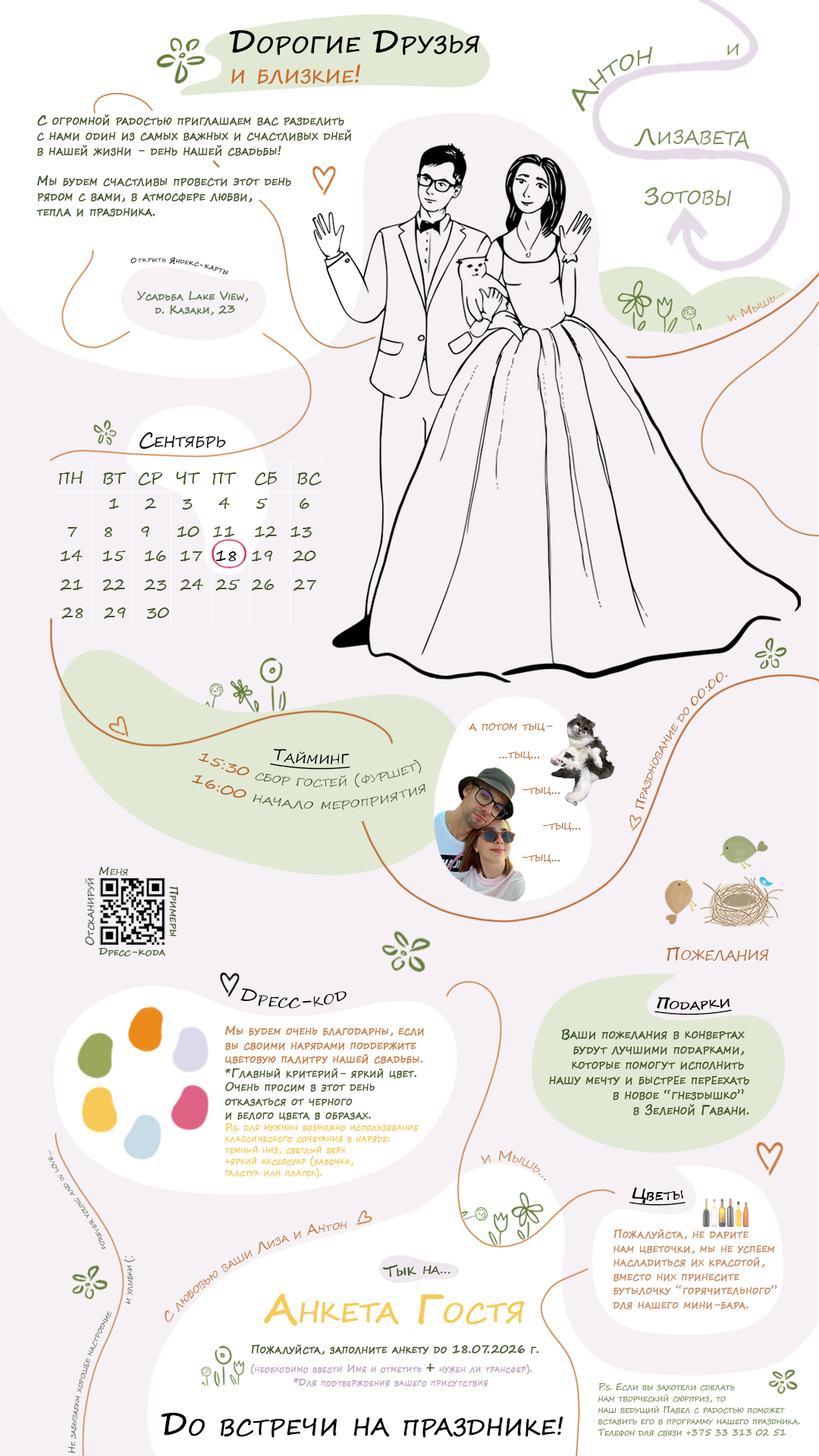
<style>
.page{position:relative;width:819px;height:1456px;background:#f5f1f5}
.page>*{position:absolute;margin:0}
.t1{font:31.6px "SegoeScript";color:#000000;font-variant:small-caps;font-weight:bold;scale:0.97 1}
.t2{font:25.3px "SegoeScript";color:#c77130;font-variant:small-caps;font-weight:bold;scale:0.97 1}
.t3{font:25.3px "SegoeScript";color:#768d52;font-variant:small-caps;scale:0.97 1}
.t4{font:19.6px "SegoeScript";color:#768d52;font-variant:small-caps}
.t5{font:12.6px "SegoeScript";color:#435528;font-variant:small-caps;font-weight:bold;scale:0.97 1}
.t6{font:7.9px "SegoeScript-Bold";color:#030303;font-variant:small-caps}
.t7{font:11.1px "SegoeScript";color:#64724e;font-variant:small-caps;font-weight:bold}
.t8{font:12.6px "SegoeScript";color:#d28f62;font-variant:small-caps;scale:0.97 1}
.t9{font:12.6px "SegoeScript";color:#b9672c;font-variant:small-caps}
.t10{font:14.1px/11.3px "SegoeScript";color:#4e5f34;font-variant:small-caps}
.t11{font:16.9px/11.3px "SegoeScript";color:#000000;font-variant:small-caps;text-decoration:underline}
.t12{font:14.1px/11.3px "SegoeScript";color:#b9672c;font-variant:small-caps}
.t13{font:11.7px "SegoeScript";color:#435528;font-variant:small-caps}
.t14{font:11.7px "SegoeScript-Bold";color:#435528;font-variant:small-caps}
.t15{font:10.7px "SegoeScript-Bold";color:#435528;font-variant:small-caps}
.t16{font:19px "SegoeScript";color:#b9672c;font-variant:small-caps}
.t17{font:19px "SegoeScript";color:#000000;font-variant:small-caps}
.t18{font:15.8px "SegoeScript-Bold";color:#000000;font-variant:small-caps;text-decoration:underline}
.t19{font:9.5px "SegoeScript";color:#f7ca57;font-variant:small-caps;font-weight:bold;scale:0.97 1}
.t20{font:11.7px "SegoeScript";color:#c97c40;font-variant:small-caps;font-weight:bold;scale:0.97 1}
.t21{font:11.7px "SegoeScript";color:#4a5c32;font-variant:small-caps;font-weight:bold;scale:0.97 1}
.t22{font:8.4px "SegoeScript";color:#51603b;font-variant:small-caps}
.t23{font:12.6px "SegoeScript";color:#c77130;font-variant:small-caps}
.t24{font:11.7px "SegoeScript";color:#c98c61;font-variant:small-caps;font-weight:bold;scale:0.97 1}
.t25{font:8.4px "SegoeScript";color:#4c5c34;font-variant:small-caps}
.t26{font:14.6px "SegoeScript-Bold";color:#4a5c31;font-variant:small-caps}
.t27{font:37.9px "SegoeScript";color:#f7ca57;font-variant:small-caps;font-weight:bold}
.t28{font:8.4px "SegoeScript";color:#435528;font-variant:small-caps}
.t29{font:11.7px "SegoeScript";color:#435528;font-variant:small-caps;font-weight:bold;scale:0.97 1}
.t30{font:9.5px "SegoeScript";color:#bfa6bf;font-variant:small-caps;font-weight:bold;scale:0.97 1}
.t31{font:15.8px "SegoeScript";color:#435528;font-variant:small-caps;font-weight:bold;scale:0.97 1}
.t32{font:9.5px "SegoeScript";color:#6d8546;font-variant:small-caps;scale:0.97 1}
.t33{font:25.3px "SegoeScript";color:#000000;font-variant:small-caps;font-weight:bold;scale:0.97 1}
</style>
<div class="page">
<p class="t1" style="left:229px;top:30px;width:251px;height:54px">Дорогие Друзья <br><span class="t2">и близкие!</span></p>
<p class="t3" style="left:572px;top:46px;width:81px;height:65px;rotate:-35deg">Антон</p>
<p class="t4" style="left:727px;top:43px;width:12px;height:12px;rotate:-2deg">и</p>
<p class="t5" style="left:36px;top:115px;width:315px;height:102px">С огромной радостью приглашаем вас разделить<br>с нами один из самых важных и счастливых дней<br>в нашей жизни - день нашей свадьбы!<br><br>Мы будем счастливы провести этот день <br>рядом с вами, в атмосфере любви, <br>тепла и праздника.</p>
<p class="t3" style="left:634px;top:128px;width:115px;height:21px">Лизавета</p>
<p class="t3" style="left:644px;top:187px;width:87px;height:19px">Зотовы</p>
<p class="t6" style="left:130px;top:257px;width:99px;height:18px;rotate:7deg">Открыть Яндекс-карты</p>
<p class="t7" style="left:136px;top:291px;width:112px;height:24px;text-align:center">Усадьба Lake View, <br>д. Казаки, 23</p>
<p class="t8" style="left:726px;top:293px;width:57px;height:29px;rotate:-27deg">и Мышь...</p>
<p class="t9" style="left:635px;top:672px;width:92px;height:137px;rotate:-62deg">Празднование до 00:00.</p>
<p class="t9" style="left:469px;top:723px;width:84px;height:9px">а потом тыц-</p>
<p class="t10" style="left:191px;top:748px;width:235px;height:62px;text-align:center;rotate:2deg"><span class="t11">Тайминг<br><br></span><span class="t12">15:30</span> сбор гостей (фуршет)<br><br><span class="t12">16:00</span> начало мероприятия</p>
<p class="t9" style="left:499px;top:751px;width:41px;height:9px">...тыц...</p>
<p class="t9" style="left:522px;top:787px;width:38px;height:8px">-тыц...</p>
<p class="t9" style="left:543px;top:823px;width:38px;height:8px">-тыц...</p>
<p class="t9" style="left:522px;top:855px;width:38px;height:8px">-тыц...</p>
<p class="t13" style="left:99px;top:867px;width:29px;height:9px">Меня</p>
<p class="t13" style="left:85px;top:878px;width:10px;height:68px;rotate:-90deg">Отсканируй</p>
<p class="t14" style="left:169px;top:886px;width:10px;height:51px;rotate:90deg">Примеры</p>
<p class="t15" style="left:99px;top:948px;width:67px;height:8px">Дресс-кода</p>
<p class="t16" style="left:667px;top:947px;width:102px;height:15px">Пожелания</p>
<p class="t17" style="left:240px;top:988px;width:107px;height:21px">Дресс-код</p>
<p class="t18" style="left:654px;top:996px;width:78px;height:19px;rotate:-1deg">Подарки</p>
<p class="t19" style="left:224px;top:1025px;width:200px;height:153px"><span class="t20">Мы будем очень благодарны, если <br>вы своими нарядами поддержите <br>цветовую палитру нашей свадьбы.<br></span><span class="t21">*Главный критерий- яркий цвет.<br>Очень просим в этот день <br>отказаться от черного <br>и белого цвета в образах.<br></span>P.s. для мужчин возможно использование <br>классического сочетания в наряде: <br>темный низ, светлый верх<br>+яркий аксессуар (бабочка, <br>галстук или платок).</p>
<p class="t5" style="left:549px;top:1029px;width:200px;height:86px;text-align:right">Ваши пожелания в конвертах <br>будут лучшими подарками, <br>которые помогут исполнить <br>нашу мечту и быстрее переехать<br>в новое “гнездышко” <br>в Зеленой Гавани.</p>
<p class="t22" style="left:48px;top:1150px;width:58px;height:100px;rotate:-119deg">forever young and in love...</p>
<p class="t8" style="left:481px;top:1150px;width:65px;height:31px;rotate:16deg">и Мышь...</p>
<p class="t18" style="left:629px;top:1187px;width:57px;height:19px">Цветы</p>
<p class="t23" style="left:165px;top:1221px;width:182px;height:102px;rotate:-28deg">С любовью ваши Лиза и Антон</p>
<p class="t24" style="left:613px;top:1229px;width:164px;height:81px">Пожалуйста, не дарите <br>нам цветочки, мы не успеем <br>насладиться их красотой, <br>вместо них принесите <br>бутылочку “горячительного”<br>для нашего мини-бара.</p>
<p class="t25" style="left:125px;top:1265px;width:8px;height:39px;rotate:-88deg">и улыбки</p>
<p class="t26" style="left:382px;top:1264px;width:68px;height:13px;rotate:-2deg">Тык на...</p>
<p class="t27" style="left:264px;top:1294px;width:261px;height:32px">Анкета Гостя</p>
<p class="t28" style="left:67px;top:1310px;width:45px;height:143px;rotate:-75deg">Не забываекм хорошее настроение</p>
<p class="t29" style="left:250px;top:1345px;width:288px;height:30px">Пожалуйста, заполните анкету до 18.07.2026 г.<br><span class="t30">(необходимо ввести Имя и отметить </span><span class="t31">+</span><span class="t30"> нужен ли трансфер).</span></p>
<p class="t30" style="left:293px;top:1378px;width:195px;height:9px">*Для подтверждения вашего присутствия</p>
<p class="t32" style="left:598px;top:1382px;width:202px;height:54px">P.s. Если вы захотели сделать <br>нам творческий сюрприз, то <br>наш ведущий Павел с радостью поможет <br>вставить его в программу нашего праздника. <br>Телефон для связи +375 33 313 02 51</p>
<p class="t1" style="left:161px;top:1413px;width:402px;height:25px">До встречи на празднике<span class="t33">!</span></p>
</div>
